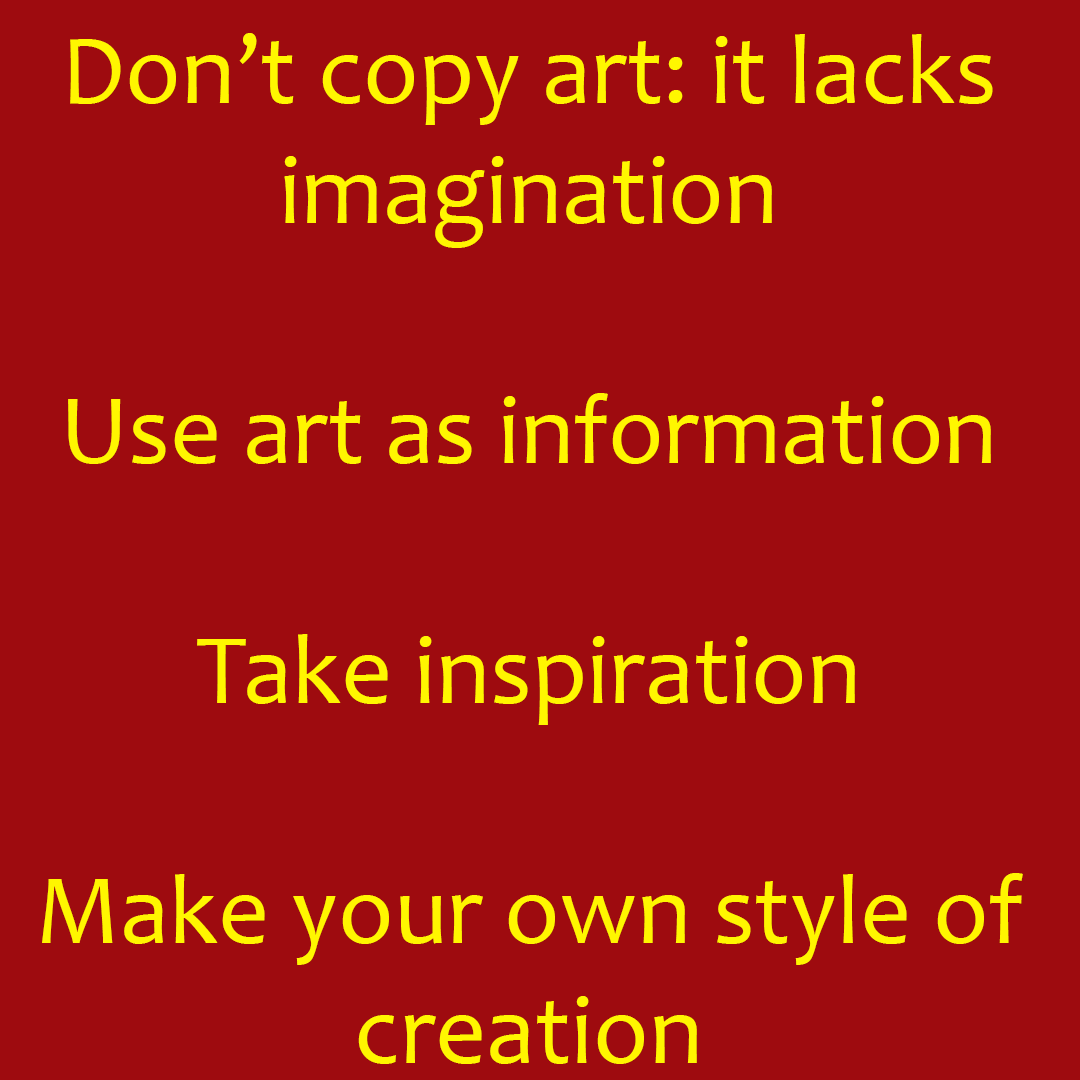
<style>
.page{position:relative;width:1080px;height:1080px;background:#9e0b0f}
.page>*{position:absolute;margin:0}
.t1{font:100px "Candara";color:#fff600}
</style>
<div class="page">
<p class="t1" style="left:42px;top:33px;width:981px;height:1031px;text-align:center">Don’t copy art: it lacks imagination<br><br>Use art as information<br><br>Take inspiration<br><br>Make your own style of creation</p>
</div>
